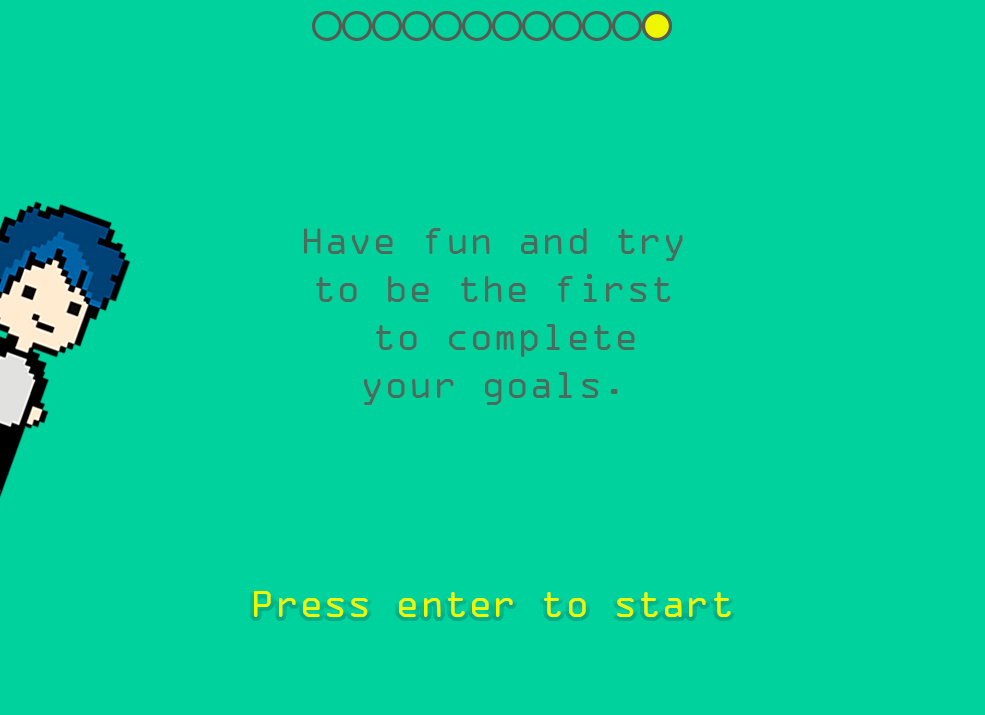
<style>
.page{position:relative;width:985px;height:715px;background:#00d29e}
.page>*{position:absolute;margin:0}
.t1{font:40px "OCRAExtended";color:#486d5d}
.t2{font:40px "OCRAExtended";color:#eef600}
</style>
<div class="page">
<p class="t1" style="left:303px;top:228px;width:380px;height:177px;text-align:center">Have fun and try<br>to be the first<br> to complete<br>your goals.</p>
<p class="t2" style="left:254px;top:591px;width:477px;height:26px">Press enter to start</p>
</div>
